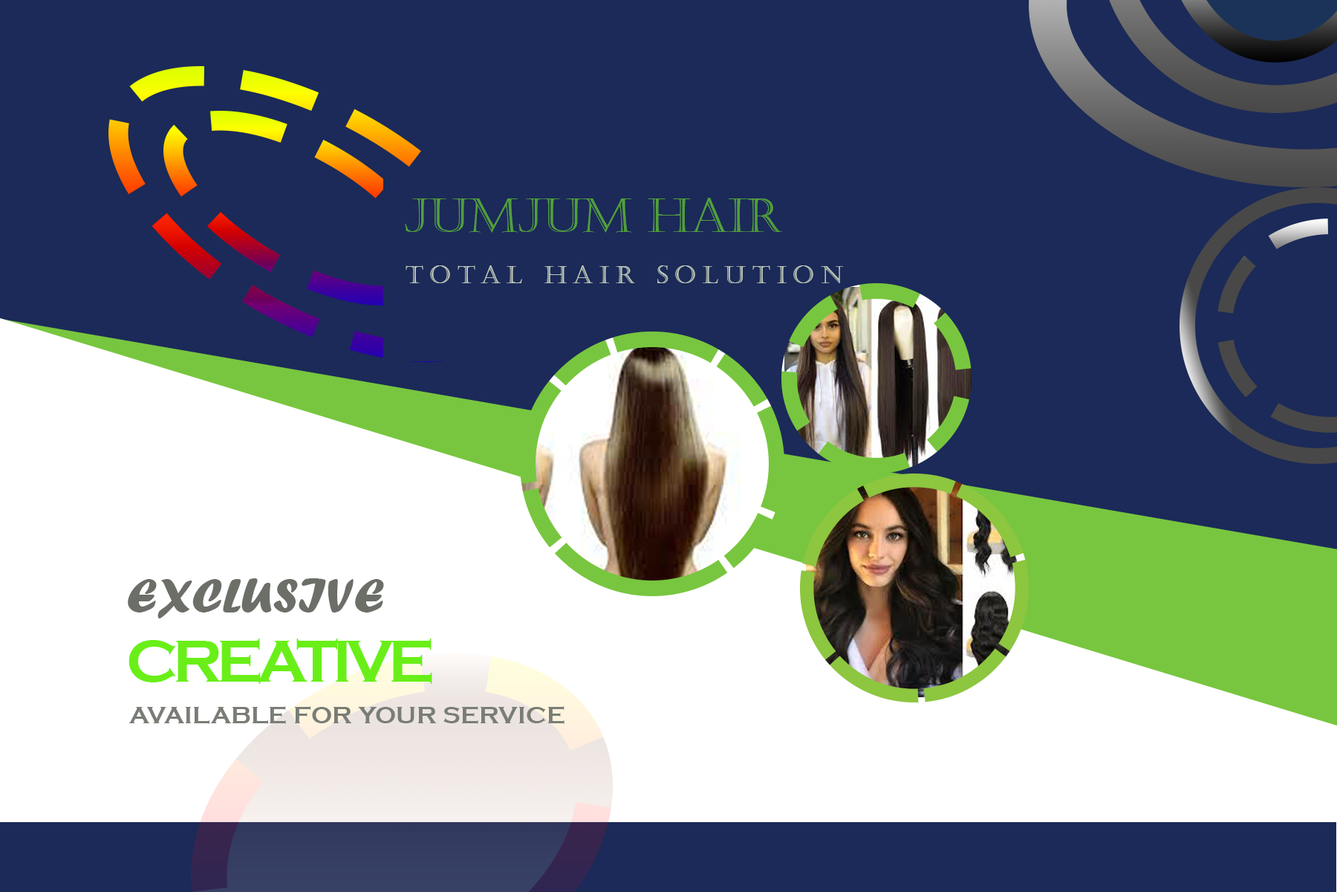
<style>
.page{position:relative;width:1337px;height:892px;background:#1b2a58}
.page>*{position:absolute;margin:0}
.t1{font:46.4px "Castellar";color:#5f9f39;text-transform:uppercase}
.t2{font:24.8px "Castellar";letter-spacing:0.26em;color:#bbc5b6;text-transform:uppercase}
.t3{font:49.5px "ForteMT";color:#6b6f68;text-transform:uppercase}
.t4{font:61.9px "CopperplateGothic-Bold";letter-spacing:-0.1em;color:#69ef17;text-transform:uppercase}
.t5{font:24.8px "CopperplateGothic-Bold";color:#797d76;text-transform:uppercase}
</style>
<div class="page">
<p class="t1" style="left:405px;top:198px;width:377px;height:35px">jumjum hair</p>
<p class="t2" style="left:406px;top:265px;width:437px;height:18px">TOTAL HAIR SOLUTION</p>
<p class="t3" style="left:128px;top:578px;width:256px;height:40px">EXCLUSIVE</p>
<p class="t4" style="left:129px;top:638px;width:303px;height:46px">CREATIVE</p>
<p class="t5" style="left:129px;top:706px;width:436px;height:18px">AVAILABLE FOR YOUR SERVICE</p>
</div>
